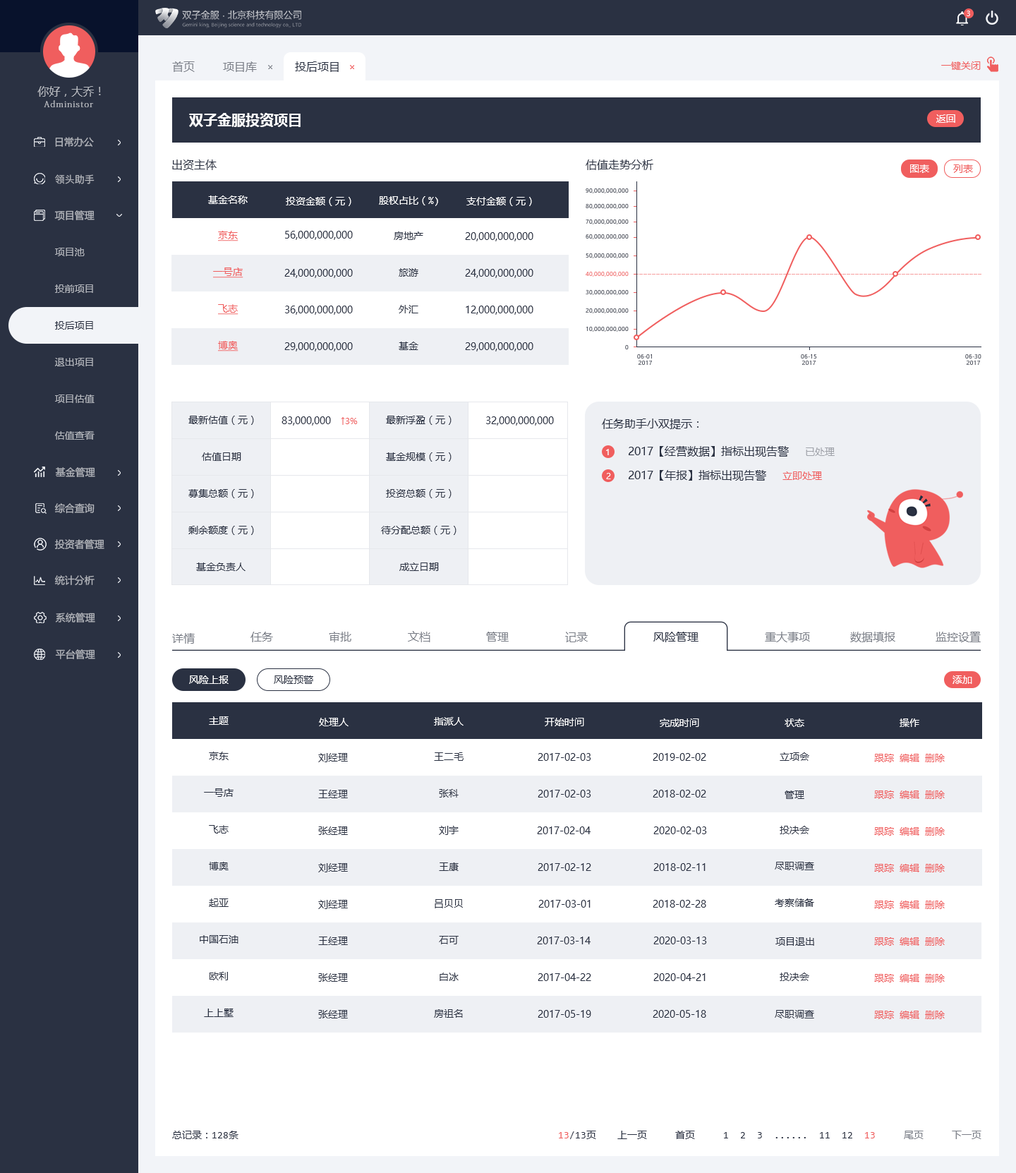
<style>
.page{position:relative;width:1016px;height:1173px;background:#ffffff}
.page>*{position:absolute;margin:0}
.t1{font:7.1px "MicrosoftYaHeiUI";color:#ffffff}
.t2{font:11.3px "MicrosoftYaHeiMono";color:#7b7f88}
.t3{font:11.3px "MicrosoftYaHeiMono";color:#2a3142}
.t4{font:9.9px "MicrosoftYaHeiMono";color:#f05e5e}
.t5{font:11.3px "MicrosoftYaHeiMono";color:#b4b7bd}
.t6{font:8.5px "AdobeFangsongStd-Regular";letter-spacing:0.1em;color:#b4b7bd}
.t7{font:14.1px "MicrosoftYaHeiUI-Bold";color:#ffffff}
.t8{font:9.9px "MicrosoftYaHeiUI";color:#ffffff}
.t9{font:9.9px "MicrosoftYaHeiUI";color:#b4b7bd}
.t10{font:11.3px "MicrosoftYaHeiUI";color:#2a3142}
.t11{font:9.9px "MicrosoftYaHeiUI";color:#f05e5e}
.t12{font:9.9px "PingFang-SC-Medium";color:#b4b7bd}
.t13{font:9.9px "MicrosoftYaHeiMono";color:#ffffff}
.t14{font:5.6px "MicrosoftYaHeiUI"}
.t15{font:9.9px "MicrosoftYaHeiMono";color:#f05e5e;text-decoration:underline}
.t16{font:9.9px "MicrosoftYaHeiUI";color:#2a3142}
.t17{font:9.9px "MicrosoftYaHeiMono";color:#2a3142}
.t18{font:5.6px "MicrosoftYaHeiUI";color:#2a3142}
.t19{font:8.5px "MicrosoftYaHeiUI";color:#f05e5e}
.t20{font:8.5px "MicrosoftYaHeiUI";color:#ffffff}
.t21{font:9.9px "MicrosoftYaHeiUI";color:#a0a3aa}
.t22{font:11.3px "MicrosoftYaHeiUI";color:#7b7f88}
.t23{font:9.9px "MicrosoftYaHeiMono";color:#7b7f88}
</style>
<div class="page">
<p class="t1" style="left:967px;top:11px;width:4px;height:5px">3</p>
<p class="t2" style="left:172px;top:61px;width:23px;height:11px">首页</p>
<p class="t2" style="left:223px;top:61px;width:34px;height:11px">项目库</p>
<p class="t3" style="left:295px;top:61px;width:44px;height:11px">投后项目</p>
<p class="t4" style="left:942px;top:61px;width:39px;height:9px">一键关闭</p>
<p class="t5" style="left:37px;top:86px;width:64px;height:11px">你好，大乔！</p>
<p class="t6" style="left:44px;top:100px;width:49px;height:7px">Administor</p>
<p class="t7" style="left:189px;top:113px;width:112px;height:14px">双子金服投资项目</p>
<p class="t8" style="left:937px;top:114px;width:19px;height:9px">返回</p>
<p class="t9" style="left:55px;top:137px;width:39px;height:10px">日常办公</p>
<p class="t10" style="left:172px;top:160px;width:45px;height:10px">出资主体</p>
<p class="t10" style="left:586px;top:160px;width:68px;height:10px">估值走势分析</p>
<p class="t8" style="left:911px;top:164px;width:19px;height:9px">图表</p>
<p class="t11" style="left:954px;top:164px;width:19px;height:9px">列表</p>
<p class="t12" style="left:55px;top:174px;width:40px;height:10px">领头助手</p>
<p class="t13" style="left:208px;top:196px;width:40px;height:8px">基金名称</p>
<p class="t13" style="left:286px;top:197px;width:66px;height:9px">投资金额（元）</p>
<p class="t13" style="left:379px;top:196px;width:59px;height:10px">股权占比（%)</p>
<p class="t13" style="left:467px;top:197px;width:65px;height:9px">支付金额（元）</p>
<p class="t14" style="left:586px;top:188px;width:43px;height:6px">90,000,000,000</p>
<p class="t14" style="left:586px;top:203px;width:43px;height:7px">80,000,000,000</p>
<p class="t9" style="left:54px;top:210px;width:41px;height:11px">项目管理</p>
<p class="t14" style="left:586px;top:219px;width:43px;height:6px">70,000,000,000</p>
<p class="t15" style="left:218px;top:231px;width:21px;height:10px">京东</p>
<p class="t16" style="left:285px;top:231px;width:68px;height:9px">56,000,000,000</p>
<p class="t17" style="left:394px;top:232px;width:30px;height:8px">房地产</p>
<p class="t16" style="left:465px;top:232px;width:69px;height:9px">20,000,000,000</p>
<p class="t14" style="left:586px;top:234px;width:43px;height:6px">60,000,000,000</p>
<p class="t9" style="left:55px;top:248px;width:30px;height:8px">项目池</p>
<p class="t14" style="left:586px;top:253px;width:43px;height:6px">50,000,000,000</p>
<p class="t15" style="left:213px;top:268px;width:31px;height:10px">一号店</p>
<p class="t16" style="left:284px;top:269px;width:69px;height:9px">24,000,000,000</p>
<p class="t17" style="left:399px;top:268px;width:20px;height:9px">旅游</p>
<p class="t16" style="left:465px;top:269px;width:69px;height:9px">24,000,000,000</p>
<p class="t14" style="left:586px;top:271px;width:43px;height:6px">40,000,000,000</p>
<p class="t9" style="left:55px;top:284px;width:38px;height:9px">投前项目</p>
<p class="t14" style="left:586px;top:289px;width:43px;height:7px">30,000,000,000</p>
<p class="t15" style="left:218px;top:304px;width:21px;height:11px">飞志</p>
<p class="t16" style="left:285px;top:306px;width:68px;height:9px">36,000,000,000</p>
<p class="t17" style="left:399px;top:305px;width:20px;height:8px">外汇</p>
<p class="t16" style="left:466px;top:306px;width:68px;height:9px">12,000,000,000</p>
<p class="t14" style="left:586px;top:308px;width:43px;height:6px">20,000,000,000</p>
<p class="t16" style="left:55px;top:321px;width:38px;height:9px">投后项目</p>
<p class="t18" style="left:586px;top:326px;width:43px;height:6px">10,000,000,000</p>
<p class="t15" style="left:218px;top:341px;width:21px;height:11px">博奥</p>
<p class="t17" style="left:399px;top:342px;width:20px;height:8px">基金</p>
<p class="t16" style="left:284px;top:342px;width:69px;height:10px">29,000,000,000</p>
<p class="t16" style="left:465px;top:342px;width:69px;height:10px">29,000,000,000</p>
<p class="t14" style="left:625px;top:344px;width:4px;height:5px">0</p>
<p class="t18" style="left:637px;top:354px;width:15px;height:11px;text-align:center">06-01<br>2017</p>
<p class="t18" style="left:801px;top:354px;width:16px;height:11px;text-align:center">06-15<br>2017</p>
<p class="t14" style="left:966px;top:354px;width:16px;height:11px;text-align:center">06-30<br>2017</p>
<p class="t9" style="left:55px;top:358px;width:38px;height:8px">退出项目</p>
<p class="t9" style="left:55px;top:395px;width:40px;height:8px">项目估值</p>
<p class="t16" style="left:188px;top:416px;width:66px;height:9px">最新估值（元）</p>
<p class="t16" style="left:282px;top:416px;width:49px;height:10px">83,000,000</p>
<p class="t19" style="left:341px;top:417px;width:17px;height:8px">↑3%</p>
<p class="t16" style="left:386px;top:416px;width:66px;height:9px">最新浮盈（元）</p>
<p class="t16" style="left:486px;top:416px;width:68px;height:10px">32,000,000,000</p>
<p class="t10" style="left:602px;top:419px;width:97px;height:10px">任务助手小双提示：</p>
<p class="t9" style="left:55px;top:431px;width:40px;height:9px">估值查看</p>
<p class="t20" style="left:606px;top:449px;width:3px;height:6px">1</p>
<p class="t10" style="left:629px;top:446px;width:160px;height:11px">2017【经营数据】指标出现告警</p>
<p class="t21" style="left:806px;top:448px;width:29px;height:8px">已处理</p>
<p class="t16" style="left:202px;top:452px;width:39px;height:9px">估值日期</p>
<p class="t16" style="left:386px;top:452px;width:66px;height:10px">基金规模（元）</p>
<p class="t9" style="left:55px;top:467px;width:40px;height:10px">基金管理</p>
<p class="t20" style="left:606px;top:473px;width:5px;height:6px">2</p>
<p class="t10" style="left:629px;top:470px;width:138px;height:11px">2017【年报】指标出现告警</p>
<p class="t11" style="left:783px;top:472px;width:39px;height:8px">立即处理</p>
<p class="t16" style="left:188px;top:489px;width:66px;height:9px">募集总额（元）</p>
<p class="t16" style="left:386px;top:489px;width:66px;height:9px">投资总额（元）</p>
<p class="t9" style="left:54px;top:503px;width:41px;height:11px">综合查询</p>
<p class="t16" style="left:188px;top:526px;width:66px;height:9px">剩余额度（元）</p>
<p class="t16" style="left:381px;top:526px;width:76px;height:9px">待分配总额（元）</p>
<p class="t9" style="left:54px;top:539px;width:50px;height:10px">投资者管理</p>
<p class="t16" style="left:196px;top:563px;width:50px;height:8px">基金负责人</p>
<p class="t16" style="left:400px;top:563px;width:39px;height:8px">成立日期</p>
<p class="t9" style="left:54px;top:575px;width:41px;height:10px">统计分析</p>
<p class="t9" style="left:55px;top:613px;width:40px;height:10px">系统管理</p>
<p class="t22" style="left:172px;top:633px;width:23px;height:11px">详情</p>
<p class="t22" style="left:251px;top:632px;width:22px;height:10px">任务</p>
<p class="t22" style="left:329px;top:632px;width:23px;height:10px">审批</p>
<p class="t22" style="left:408px;top:631px;width:23px;height:11px">文档</p>
<p class="t22" style="left:486px;top:632px;width:23px;height:10px">管理</p>
<p class="t22" style="left:565px;top:632px;width:23px;height:10px">记录</p>
<p class="t10" style="left:654px;top:632px;width:45px;height:10px">风险管理</p>
<p class="t22" style="left:765px;top:632px;width:45px;height:10px">重大事项</p>
<p class="t22" style="left:851px;top:632px;width:45px;height:10px">数据填报</p>
<p class="t22" style="left:936px;top:632px;width:45px;height:10px">监控设置</p>
<p class="t9" style="left:55px;top:649px;width:40px;height:10px">平台管理</p>
<p class="t8" style="left:189px;top:676px;width:40px;height:8px">风险上报</p>
<p class="t16" style="left:274px;top:676px;width:39px;height:8px">风险预警</p>
<p class="t8" style="left:953px;top:676px;width:20px;height:8px">添加</p>
<p class="t13" style="left:209px;top:716px;width:20px;height:9px">主题</p>
<p class="t13" style="left:319px;top:718px;width:30px;height:8px">处理人</p>
<p class="t13" style="left:434px;top:717px;width:30px;height:9px">指派人</p>
<p class="t13" style="left:545px;top:718px;width:39px;height:8px">开始时间</p>
<p class="t13" style="left:660px;top:719px;width:40px;height:8px">完成时间</p>
<p class="t13" style="left:785px;top:719px;width:20px;height:8px">状态</p>
<p class="t13" style="left:900px;top:719px;width:20px;height:8px">操作</p>
<p class="t17" style="left:209px;top:752px;width:20px;height:8px">京东</p>
<p class="t17" style="left:318px;top:753px;width:30px;height:9px">刘经理</p>
<p class="t17" style="left:434px;top:752px;width:30px;height:9px">王二毛</p>
<p class="t16" style="left:538px;top:753px;width:54px;height:8px">2017-02-03</p>
<p class="t16" style="left:653px;top:753px;width:54px;height:8px">2019-02-02</p>
<p class="t17" style="left:780px;top:752px;width:30px;height:9px">立项会</p>
<p class="t4" style="left:875px;top:754px;width:70px;height:8px">跟踪 编辑 删除</p>
<p class="t17" style="left:204px;top:788px;width:30px;height:9px">一号店</p>
<p class="t17" style="left:318px;top:790px;width:30px;height:8px">王经理</p>
<p class="t17" style="left:439px;top:789px;width:20px;height:9px">张科</p>
<p class="t16" style="left:538px;top:790px;width:54px;height:8px">2017-02-03</p>
<p class="t16" style="left:653px;top:790px;width:54px;height:8px">2018-02-02</p>
<p class="t17" style="left:785px;top:791px;width:20px;height:8px">管理</p>
<p class="t4" style="left:875px;top:791px;width:70px;height:8px">跟踪 编辑 删除</p>
<p class="t17" style="left:209px;top:825px;width:20px;height:9px">飞志</p>
<p class="t17" style="left:318px;top:827px;width:30px;height:8px">张经理</p>
<p class="t17" style="left:439px;top:826px;width:20px;height:9px">刘宇</p>
<p class="t16" style="left:537px;top:827px;width:54px;height:7px">2017-02-04</p>
<p class="t16" style="left:654px;top:827px;width:53px;height:7px">2020-02-03</p>
<p class="t17" style="left:780px;top:826px;width:30px;height:8px">投决会</p>
<p class="t4" style="left:875px;top:827px;width:70px;height:9px">跟踪 编辑 删除</p>
<p class="t17" style="left:209px;top:862px;width:20px;height:8px">博奥</p>
<p class="t17" style="left:318px;top:863px;width:30px;height:9px">刘经理</p>
<p class="t17" style="left:439px;top:863px;width:20px;height:8px">王康</p>
<p class="t16" style="left:538px;top:863px;width:54px;height:8px">2017-02-12</p>
<p class="t16" style="left:654px;top:863px;width:52px;height:8px">2018-02-11</p>
<p class="t17" style="left:775px;top:862px;width:40px;height:8px">尽职调查</p>
<p class="t4" style="left:875px;top:864px;width:70px;height:8px">跟踪 编辑 删除</p>
<p class="t17" style="left:209px;top:899px;width:20px;height:8px">起亚</p>
<p class="t17" style="left:318px;top:900px;width:30px;height:9px">刘经理</p>
<p class="t17" style="left:435px;top:899px;width:28px;height:9px">吕贝贝</p>
<p class="t16" style="left:539px;top:900px;width:52px;height:8px">2017-03-01</p>
<p class="t16" style="left:653px;top:900px;width:54px;height:8px">2018-02-28</p>
<p class="t17" style="left:775px;top:899px;width:40px;height:8px">考察储备</p>
<p class="t4" style="left:875px;top:901px;width:70px;height:8px">跟踪 编辑 删除</p>
<p class="t17" style="left:200px;top:935px;width:39px;height:9px">中国石油</p>
<p class="t17" style="left:318px;top:937px;width:30px;height:8px">王经理</p>
<p class="t17" style="left:439px;top:936px;width:20px;height:8px">石可</p>
<p class="t16" style="left:537px;top:937px;width:54px;height:7px">2017-03-14</p>
<p class="t16" style="left:654px;top:937px;width:53px;height:7px">2020-03-13</p>
<p class="t17" style="left:776px;top:937px;width:39px;height:9px">项目退出</p>
<p class="t4" style="left:875px;top:937px;width:70px;height:9px">跟踪 编辑 删除</p>
<p class="t17" style="left:209px;top:972px;width:19px;height:8px">欧利</p>
<p class="t17" style="left:318px;top:973px;width:30px;height:9px">张经理</p>
<p class="t17" style="left:440px;top:973px;width:19px;height:8px">白冰</p>
<p class="t16" style="left:538px;top:973px;width:54px;height:8px">2017-04-22</p>
<p class="t16" style="left:654px;top:973px;width:52px;height:8px">2020-04-21</p>
<p class="t17" style="left:780px;top:973px;width:30px;height:8px">投决会</p>
<p class="t4" style="left:875px;top:974px;width:70px;height:9px">跟踪 编辑 删除</p>
<p class="t17" style="left:204px;top:1009px;width:30px;height:8px">上上墅</p>
<p class="t17" style="left:318px;top:1010px;width:30px;height:9px">张经理</p>
<p class="t17" style="left:434px;top:1009px;width:29px;height:9px">房祖名</p>
<p class="t16" style="left:538px;top:1010px;width:54px;height:8px">2017-05-19</p>
<p class="t16" style="left:653px;top:1010px;width:54px;height:8px">2020-05-18</p>
<p class="t17" style="left:775px;top:1010px;width:40px;height:9px">尽职调查</p>
<p class="t4" style="left:875px;top:1011px;width:70px;height:8px">跟踪 编辑 删除</p>
<p class="t17" style="left:172px;top:1131px;width:67px;height:8px">总记录：128条</p>
<p class="t17" style="left:559px;top:1131px;width:37px;height:8px"><span class="t4">13</span>/13页</p>
<p class="t17" style="left:618px;top:1131px;width:364px;height:8px">上一页     首页     1  2  3  ......  11  12  <span class="t4">13     </span><span class="t23">尾页     下一页</span></p>
</div>
